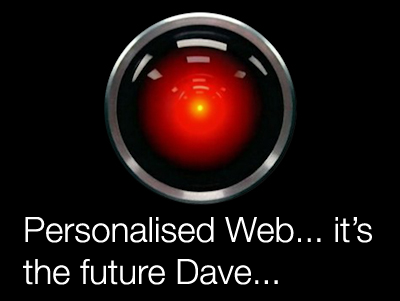
<style>
.page{position:relative;width:400px;height:301px;background:#000000}
.page>*{position:absolute;margin:0}
.t1{font:35px "HelveticaNeue-Light";color:#ffffff}
</style>
<div class="page">
<p class="t1" style="left:23px;top:217px;width:349px;height:68px">Personalised Web... it’s<br>the future Dave...</p>
</div>
